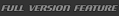
<style>
.page{position:relative;width:119px;height:16px;background:#333333}
.page>*{position:absolute;margin:0}
.t1{font:13px "Motorwerk";letter-spacing:-0.025em;color:#8f8f8f}
</style>
<div class="page">
<p class="t1" style="left:1px;top:5px;width:117px;height:6px">FULL VERSION FEATURE</p>
</div>
